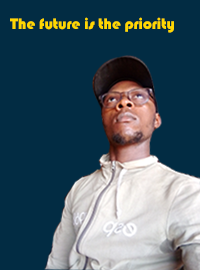
<style>
.page{position:relative;width:200px;height:270px;background:#022c43}
.page>*{position:absolute;margin:0}
.t1{font:15.6px "Bauhaus93";color:#ffd700}
</style>
<div class="page">
<p class="t1" style="left:10px;top:17px;width:164px;height:16px">The future is the priority</p>
</div>
